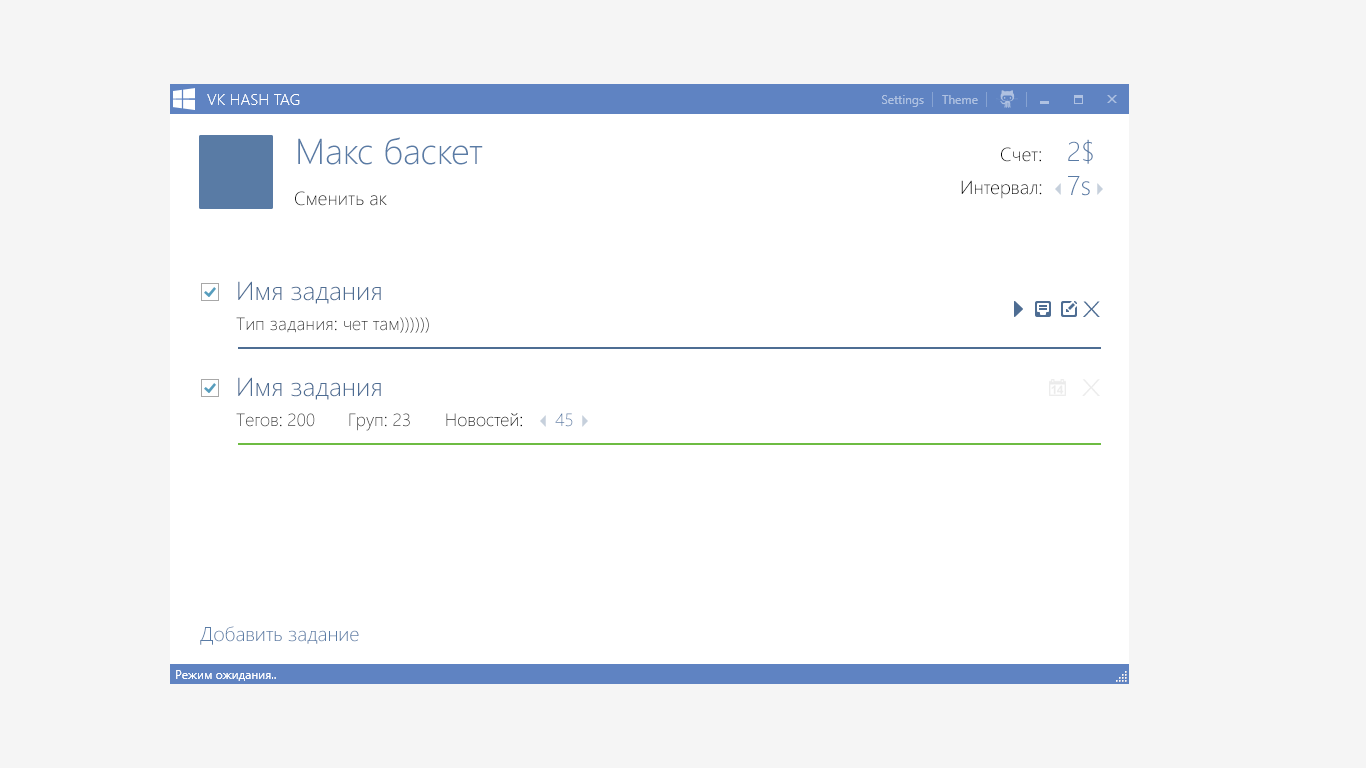
<style>
.page{position:relative;width:1366px;height:768px;background:#ffffff}
.page>*{position:absolute;margin:0}
.t1{font:36px "SegoeUI-Light";color:#597ba5}
.t2{font:19px "SegoeUI-Light";color:#040404}
.t3{font:27px "SegoeUI-Light";color:#597ba5}
.t4{font:19px "SegoeUI-Light";color:#1b1b1b}
.t5{font:26px "SegoeUI-Light";color:#4e6d93}
.t6{font:18px "SegoeUI-Light";color:#2a2a2a}
.t7{font:24.1px "SegoeUI-Light";color:#ececec;scale:1.49 1}
.t8{font:18px "SegoeUI-Light";color:#040404}
.t9{font:18px "SegoeUI-Light";color:#597ba5}
.t10{font:20px "SegoeUI-Light";color:#597ba5}
</style>
<div class="page">
<p class="t1" style="left:298px;top:137px;width:185px;height:28px">Макс баскет</p>
<p class="t2" style="left:1001px;top:147px;width:40px;height:15px">Счет:</p>
<p class="t3" style="left:1068px;top:139px;width:25px;height:25px">2$</p>
<p class="t2" style="left:961px;top:180px;width:81px;height:19px">Интервал:</p>
<p class="t3" style="left:1068px;top:176px;width:22px;height:20px">7s</p>
<p class="t4" style="left:295px;top:191px;width:92px;height:15px">Сменить ак</p>
<p class="t5" style="left:238px;top:281px;width:143px;height:23px">Имя задания</p>
<p class="t6" style="left:236px;top:317px;width:193px;height:16px">Тип задания: чет там))))))</p>
<p class="t5" style="left:238px;top:377px;width:143px;height:23px">Имя задания</p>
<p class="t7" style="left:1082px;top:379px;width:18px;height:17px">X</p>
<p class="t6" style="left:236px;top:413px;width:79px;height:14px">Тегов: 200</p>
<p class="t6" style="left:349px;top:413px;width:61px;height:18px">Груп: 23</p>
<p class="t8" style="left:446px;top:413px;width:76px;height:14px">Новостей:</p>
<p class="t9" style="left:555px;top:413px;width:18px;height:14px">45</p>
<p class="t10" style="left:200px;top:626px;width:159px;height:19px">Добавить задание</p>
</div>
